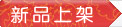
<style>
.page{position:relative;width:122px;height:27px}
.page>*{position:absolute;margin:0}
.t1{font:18px "FZY3JW--GB1-0";letter-spacing:0.2em;color:#ffffff}
</style>
<div class="page">
<p class="t1" style="left:11px;top:6px;width:82px;height:18px">新品上架</p>
</div>
